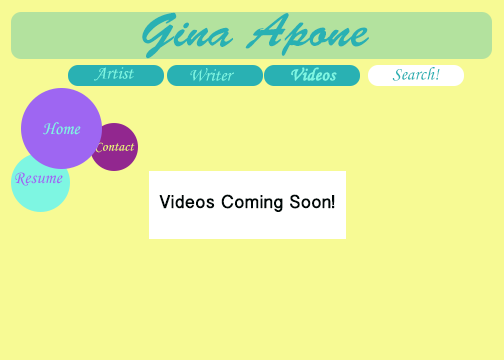
<style>
.page{position:relative;width:504px;height:360px;background:#f7fa94}
.page>*{position:absolute;margin:0}
.t1{font:48px "BrushScriptStd";color:#29b1b3}
.t2{font:18px "MonotypeCorsiva";color:#7ef6e2}
.t3{font:18px "MonotypeCorsiva";color:#7ef6e2;font-weight:bold}
.t4{font:18px "MonotypeCorsiva";color:#29b1b3}
.t5{font:14px "MonotypeCorsiva";color:#eef275}
.t6{font:18px "MonotypeCorsiva";color:#9e66f2}
.t7{font:18px "BanglaSangamMN";color:#010908;font-weight:bold}
</style>
<div class="page">
<p class="t1" style="left:142px;top:12px;width:227px;height:47px">Gina Apone</p>
<p class="t2" style="left:94px;top:67px;width:40px;height:14px">Artist</p>
<p class="t2" style="left:190px;top:68px;width:44px;height:14px">Writer</p>
<p class="t3" style="left:291px;top:67px;width:46px;height:14px">Videos</p>
<p class="t4" style="left:392px;top:67px;width:48px;height:14px">Search!</p>
<p class="t2" style="left:43px;top:122px;width:38px;height:13px">Home</p>
<p class="t5" style="left:95px;top:142px;width:40px;height:11px">Contact</p>
<p class="t6" style="left:15px;top:172px;width:48px;height:14px">Resume</p>
<p class="t7" style="left:159px;top:194px;width:176px;height:18px">Videos Coming Soon!</p>
</div>
